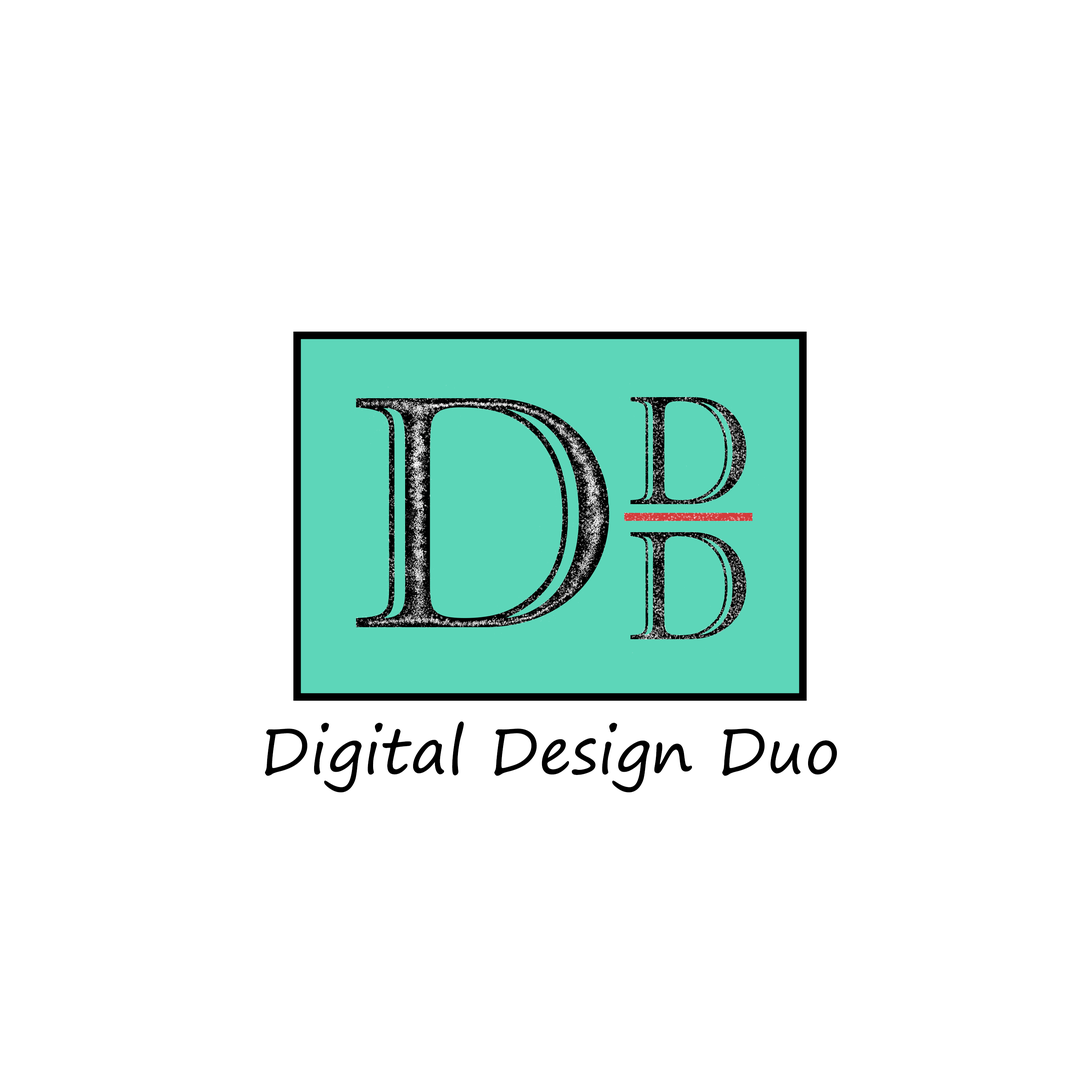
<style>
.page{position:relative;width:1092px;height:1092px;background:#ffffff}
.page>*{position:absolute;margin:0}
.t1{font:62.2px "SegoePrint";color:#000000}
</style>
<div class="page">
<p class="t1" style="left:265px;top:721px;width:572px;height:71px">Digital Design Duo</p>
</div>
